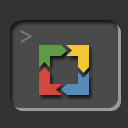
<style>
.page{position:relative;width:128px;height:128px;background:#333333}
.page>*{position:absolute;margin:0}
.t1{font:24px "Inconsolata";color:#7b7b7b}
</style>
<div class="page">
<p class="t1" style="left:20px;top:30px;width:12px;height:13px">&gt;</p>
</div>
